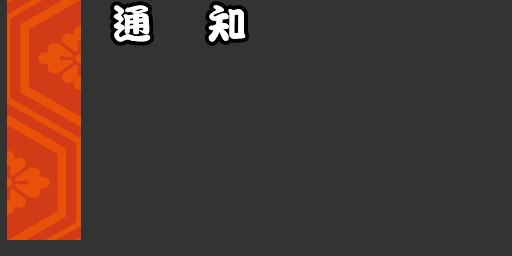
<style>
.page{position:relative;width:512px;height:256px;background:#333333}
.page>*{position:absolute;margin:0}
.t1{font:40px "DFPKanTingLiuW9";letter-spacing:0.1em;color:#ffffff}
</style>
<div class="page">
<p class="t1" style="left:113px;top:5px;width:133px;height:37px">通   知</p>
</div>
